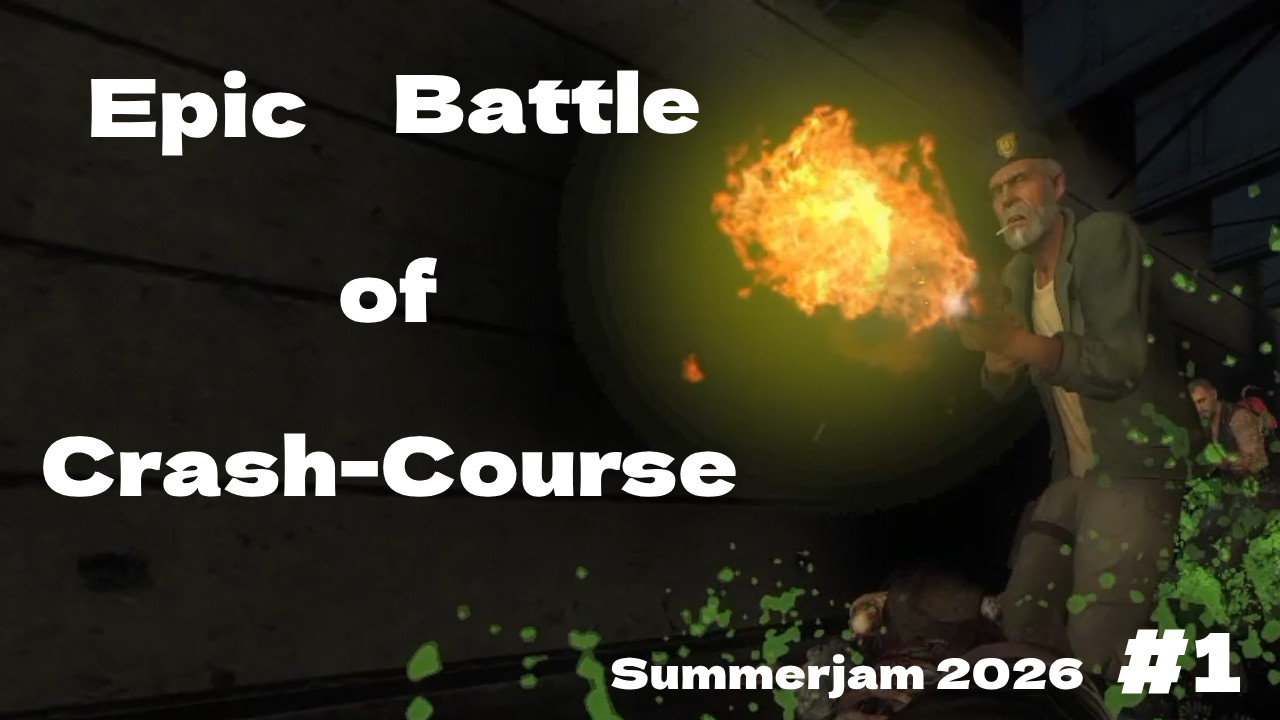
<style>
.page{position:relative;width:1280px;height:720px}
.page>*{position:absolute;margin:0}
.t1{font:80px "DelaGothicOne-Regular";color:#ffffff;font-weight:bold}
.t2{font:42px "DelaGothicOne-Regular";color:#ffffff;font-weight:bold}
</style>
<div class="page">
<p class="t1" style="left:91px;top:70px;width:215px;height:86px">Epic</p>
<p class="t1" style="left:396px;top:70px;width:303px;height:64px">Battle</p>
<p class="t1" style="left:340px;top:257px;width:98px;height:66px">of</p>
<p class="t1" style="left:43px;top:433px;width:693px;height:64px">Crash-Course</p>
<p class="t1" style="left:1117px;top:629px;width:124px;height:65px">#1</p>
<p class="t2" style="left:611px;top:654px;width:472px;height:45px">Summerjam 2026</p>
</div>
